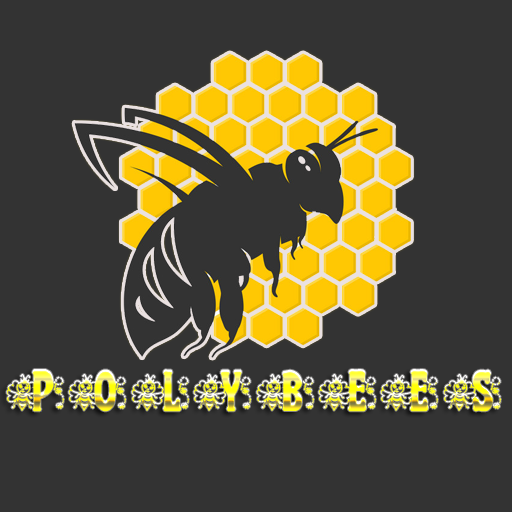
<style>
.page{position:relative;width:512px;height:512px;background:#333333}
.page>*{position:absolute;margin:0}
.t1{font:43.5px "BJFHunnybee";letter-spacing:0.088em;text-transform:uppercase}
</style>
<div class="page">
<p class="t1" style="left:6px;top:369px;width:495px;height:43px">POLYBEES</p>
</div>
